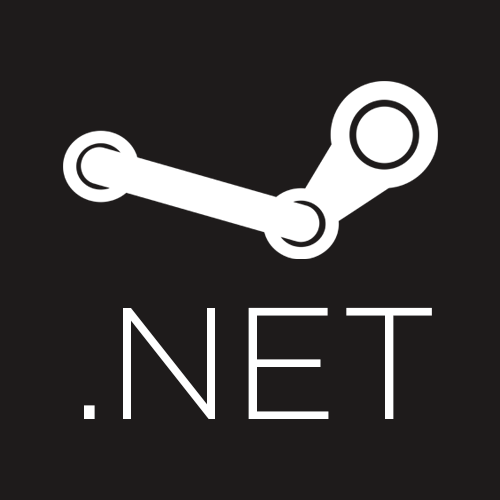
<style>
.page{position:relative;width:500px;height:500px;background:#1e1b1b}
.page>*{position:absolute;margin:0}
.t1{font:158.2px "Gotham-Light";color:#ffffff}
</style>
<div class="page">
<p class="t1" style="left:84px;top:307px;width:348px;height:112px">.NET</p>
</div>
